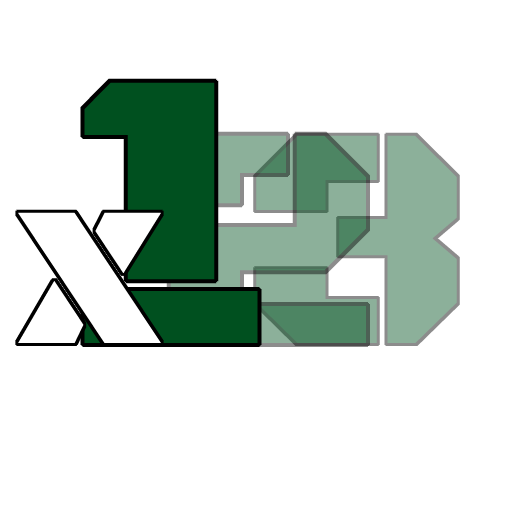
<style>
.page{position:relative;width:512px;height:512px;background:#ffffff}
.page>*{position:absolute;margin:0}
.t1{font:400.1px "BlackOpsOne-Regular";color:#00501f}
.t2{font:320px "BlackOpsOne-Regular"}
.t3{font:250px "BlackOpsOne-Regular";color:#ffffff}
</style>
<div class="page">
<p class="t1" style="left:84px;top:82px;width:174px;height:261px">1</p>
<p class="t2" style="left:256px;top:135px;width:201px;height:208px">3</p>
<p class="t3" style="left:18px;top:212px;width:143px;height:131px">x</p>
</div>
